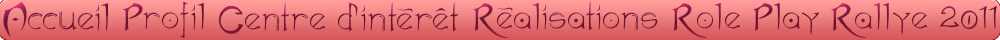
<style>
.page{position:relative;width:1000px;height:40px}
.page>*{position:absolute;margin:0}
.t1{font:36px "AKVALEIR";color:#7d173a}
.t2{font:35px "AKVALEIR";color:#7c173a}
.t3{font:35px "AKVALEIR";color:#781433}
.t4{font:35px "AKVALEIR";color:#781535}
.t5{font:35px "AKVALEIR";color:#7a1536}
.t6{font:35px "AKVALEIR";color:#7b1637}
</style>
<div class="page">
<p class="t1" style="left:3px;top:2px;width:106px;height:35px">Accueil</p>
<p class="t2" style="left:123px;top:1px;width:81px;height:38px">Profil</p>
<p class="t3" style="left:218px;top:2px;width:241px;height:32px">Centre d’intérêt</p>
<p class="t4" style="left:473px;top:1px;width:185px;height:37px">Réalisations</p>
<p class="t5" style="left:672px;top:3px;width:148px;height:35px">Role Play</p>
<p class="t6" style="left:831px;top:3px;width:166px;height:35px">Rallye 2011</p>
</div>
